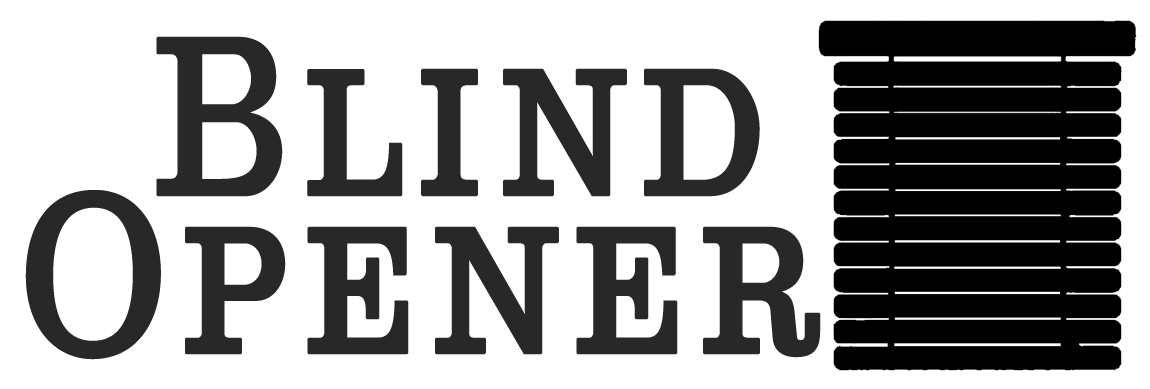
<style>
.page{position:relative;width:1150px;height:389px;background:#ffffff}
.page>*{position:absolute;margin:0}
.t1{font:226.1px "ClarendonTextPro";letter-spacing:0.04em;color:#282828;font-variant:small-caps;font-weight:bold;scale:0.84 1}
</style>
<div class="page">
<p class="t1" style="left:156px;top:36px;width:604px;height:161px">Blind</p>
<p class="t1" style="left:25px;top:190px;width:796px;height:170px">Opener</p>
</div>
